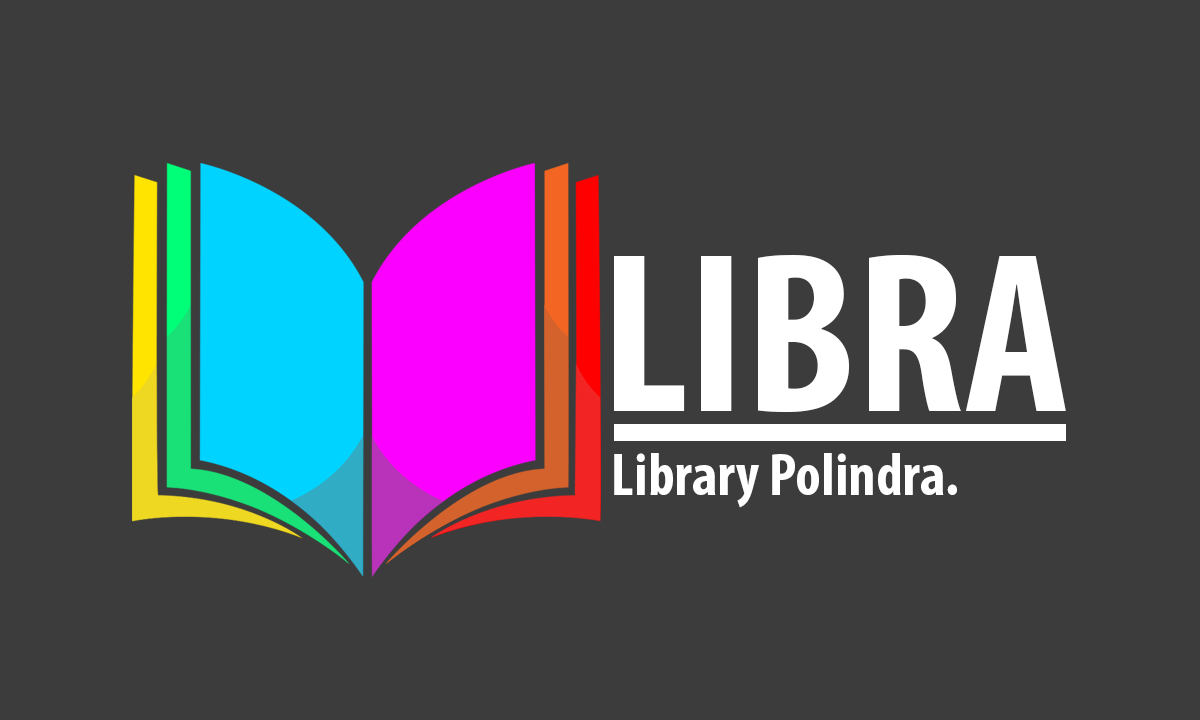
<style>
.page{position:relative;width:1200px;height:720px;background:#3c3c3c}
.page>*{position:absolute;margin:0}
.t1{font:230px "MyriadPro-BoldCond";color:#ffffff}
.t2{font:60px "MyriadPro-BoldCond";color:#ffffff}
</style>
<div class="page">
<p class="t1" style="left:614px;top:254px;width:452px;height:158px">LIBRA</p>
<p class="t2" style="left:614px;top:453px;width:343px;height:55px">Library Polindra.</p>
</div>
